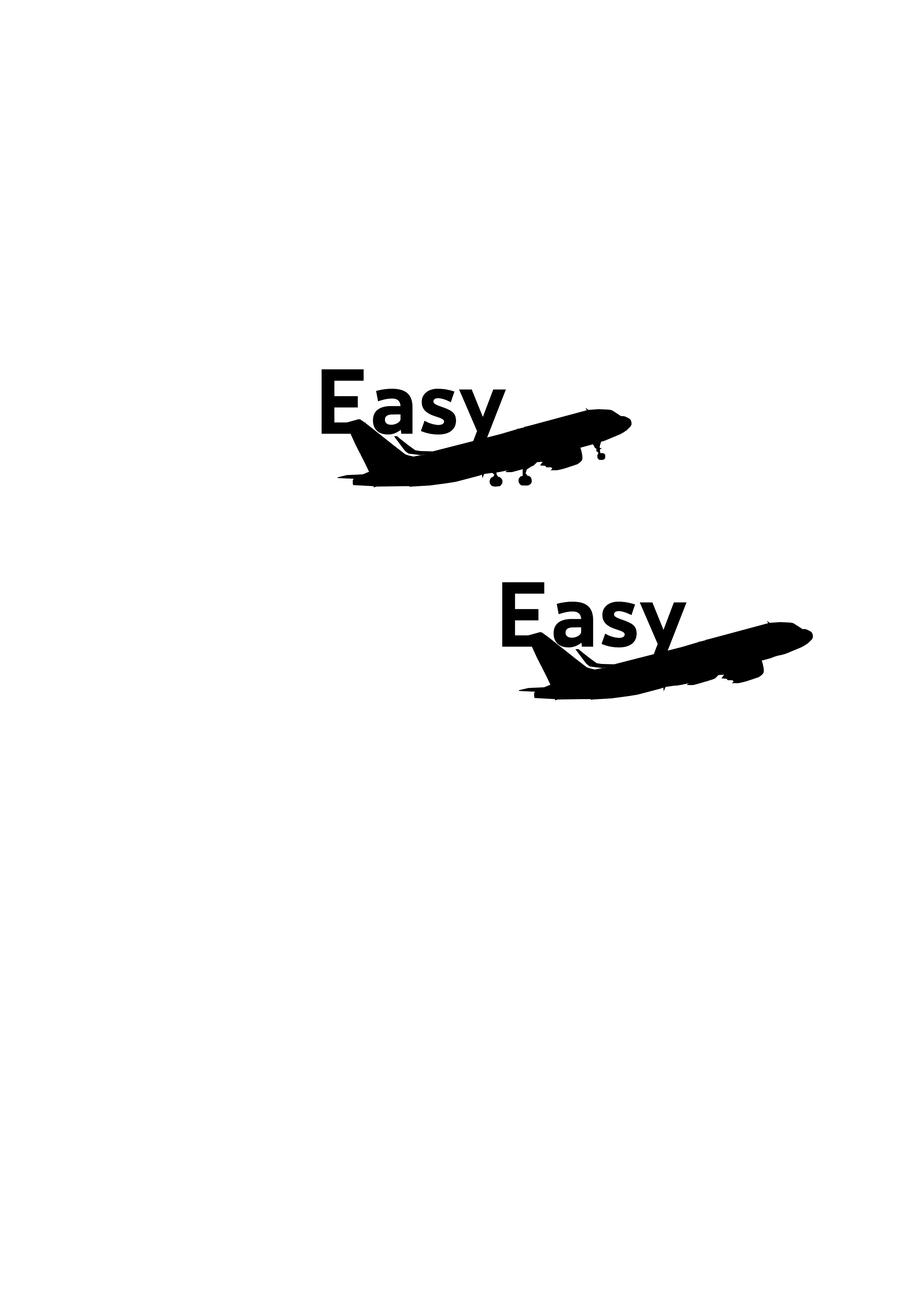
<style>
.page{position:relative;width:918px;height:1299px;background:#ffffff}
.page>*{position:absolute;margin:0}
.t1{font:90.7px "RavensbourneSans-Bold";color:#000000}
</style>
<div class="page">
<p class="t1" style="left:321px;top:369px;width:185px;height:86px">Easy</p>
<p class="t1" style="left:502px;top:582px;width:185px;height:86px">Easy</p>
</div>
